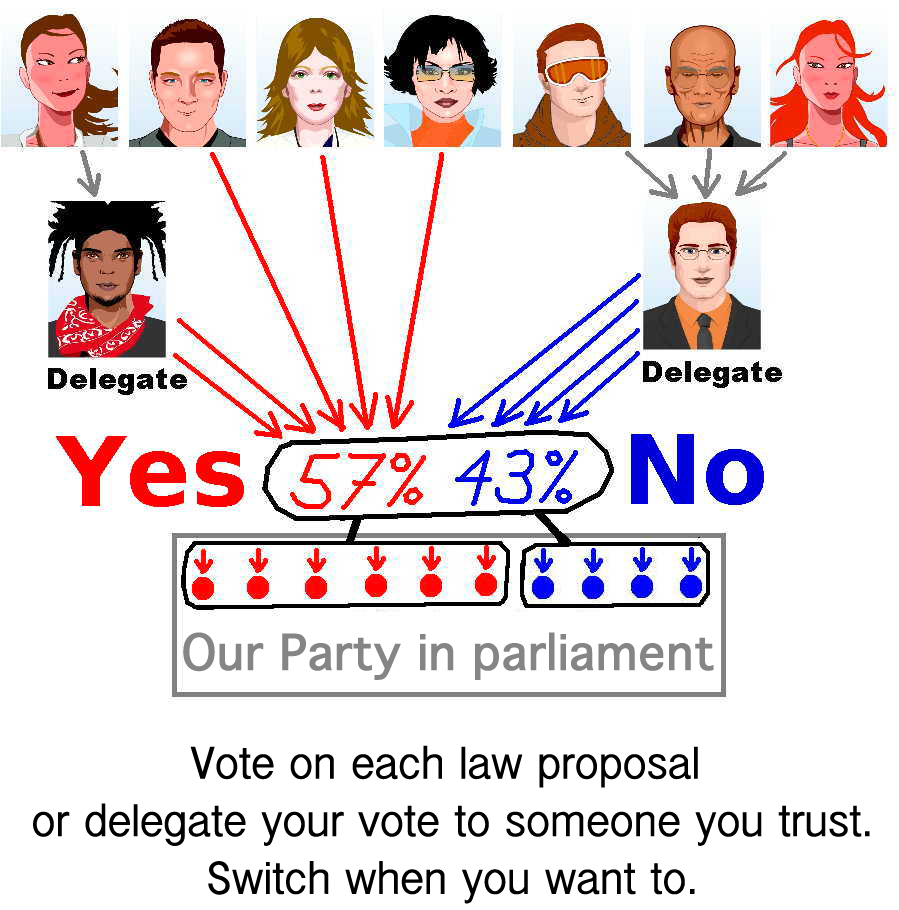
<style>
.page{position:relative;width:899px;height:910px;background:#ffffff}
.page>*{position:absolute;margin:0}
.t1{font:48px "Thonburi-Bold";color:#868585}
.t2{font:48px "InaiMathi";color:#000000}
</style>
<div class="page">
<p class="t1" style="left:183px;top:632px;width:531px;height:48px">Our Party in parliament</p>
<p class="t2" style="left:33px;top:745px;width:837px;height:159px;text-align:center">Vote on each law proposal <br>or delegate your vote to someone you trust.<br>Switch when you want to.</p>
</div>
